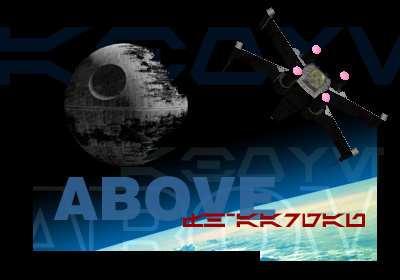
<style>
.page{position:relative;width:400px;height:280px;background:#000000}
.page>*{position:absolute;margin:0}
.t1{font:35.9px "Aurek-Besh"}
.t2{font:59.8px "Swiss721BT-Black";color:#336699}
.t3{font:13.9px "Aurek-Besh";color:#990000}
</style>
<div class="page">
<p class="t1" style="left:120px;top:147px;width:264px;height:35px">ABOVE</p>
<p class="t2" style="left:53px;top:176px;width:223px;height:45px;opacity:0.88">ABOVE</p>
<p class="t3" style="left:183px;top:213px;width:182px;height:14px">FH-Aargau</p>
</div>
